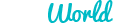
<style>
.page{position:relative;width:113px;height:23px;background:#ffffff}
.page>*{position:absolute;margin:0}
.t1{font:24px "Pacifico";color:#00bac6}
.t2{font:24px "Pacifico";color:#ffffff}
</style>
<div class="page">
<p class="t1" style="left:0px;top:0px;width:113px;height:23px"><span class="t2">Web</span>World</p>
</div>
